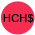
<style>
.page{position:relative;width:35px;height:35px;background:#f62d51}
.page>*{position:absolute;margin:0}
.t1{font:11.2px "ArialMT";color:#000000}
</style>
<div class="page">
<p class="t1" style="left:3px;top:14px;width:31px;height:9px">HCH$</p>
</div>
